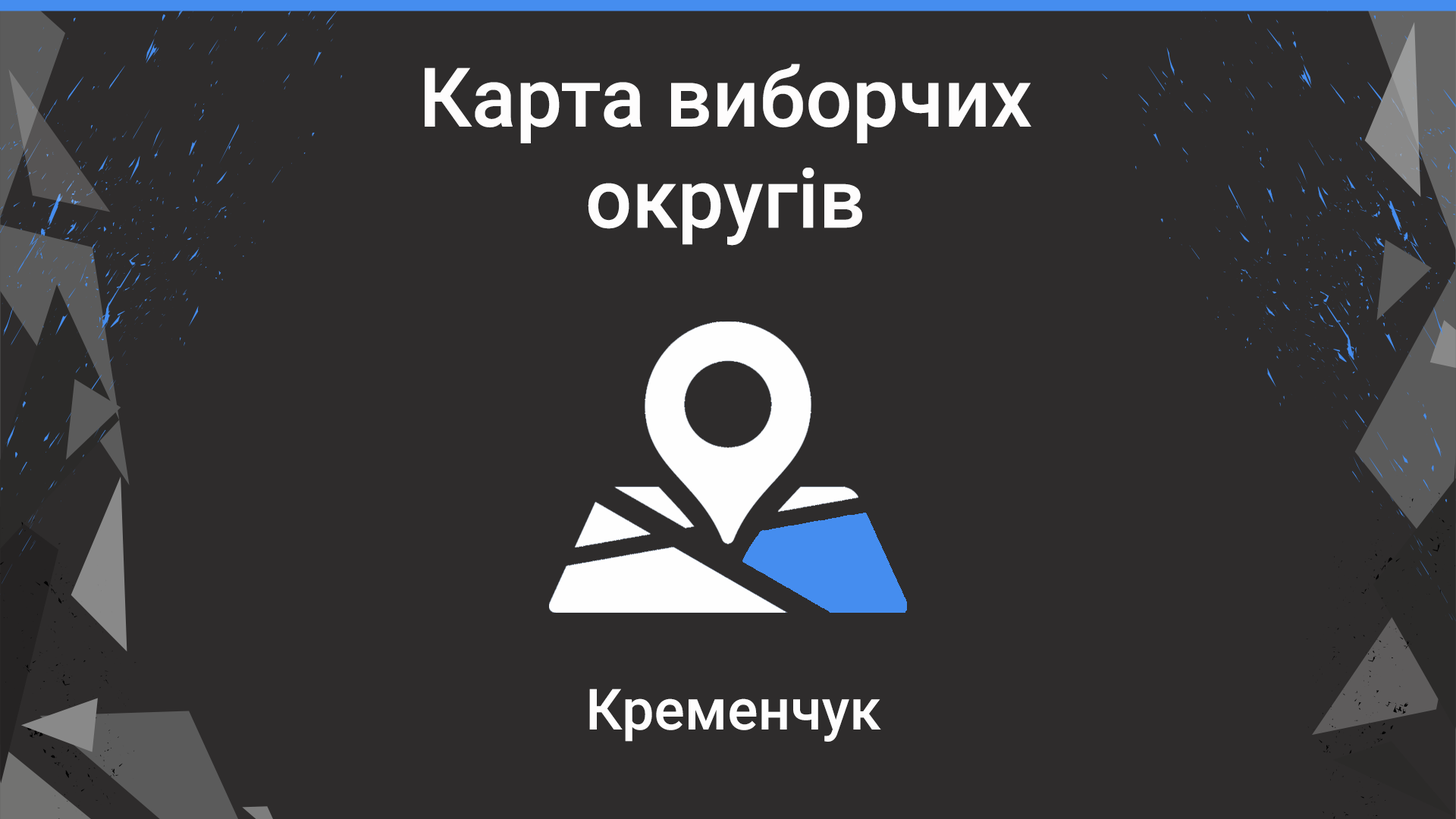
<style>
.page{position:relative;width:1456px;height:819px;background:#2e2c2c}
.page>*{position:absolute;margin:0}
.t1{font:82.2px/101.1px "Roboto-Medium";color:#fefdfd}
.t2{font:56.9px "Roboto-Medium";color:#fefdfd}
</style>
<div class="page">
<p class="t1" style="left:425px;top:64px;width:606px;height:182px;text-align:center">Карта виборчих<br>округів</p>
<p class="t2" style="left:589px;top:689px;width:292px;height:53px">Кременчук</p>
</div>
